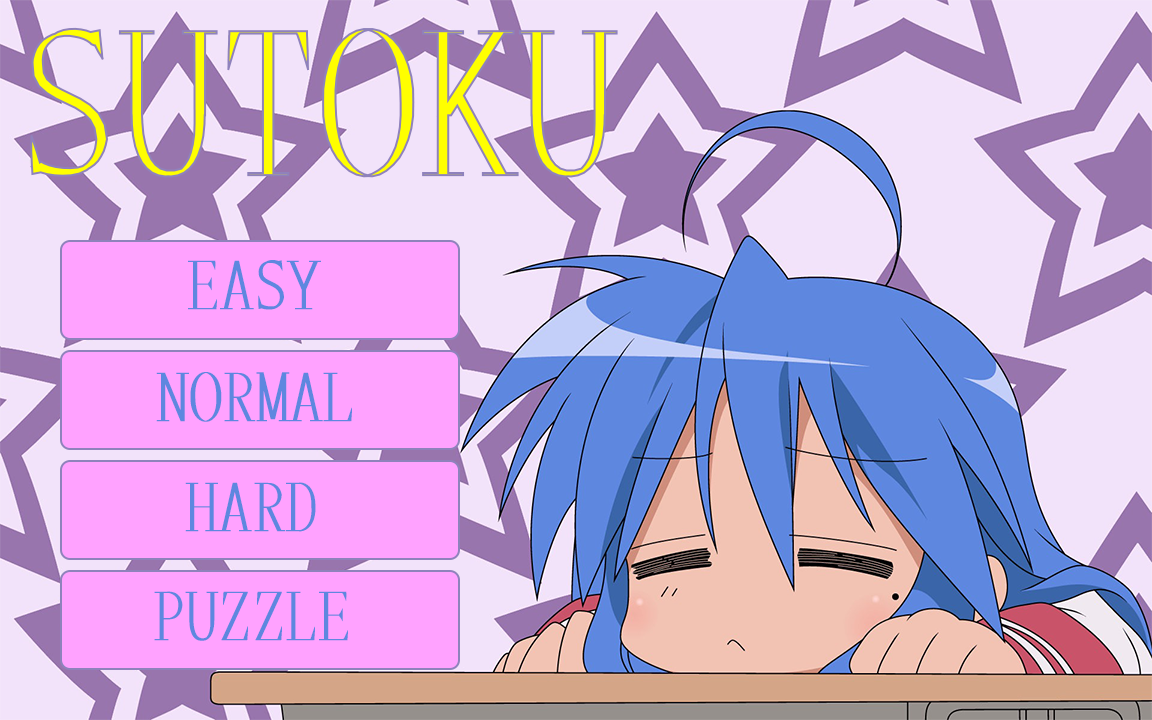
<style>
.page{position:relative;width:1152px;height:720px;background:#f2e3fa}
.page>*{position:absolute;margin:0}
.t1{font:66.7px "HanaMinA";color:#5e87df}
</style>
<div class="page">
<p class="t1" style="left:188px;top:260px;width:133px;height:50px">EASY</p>
<p class="t1" style="left:156px;top:372px;width:196px;height:50px">NORMAL</p>
<p class="t1" style="left:185px;top:482px;width:131px;height:50px">HARD</p>
<p class="t1" style="left:154px;top:591px;width:194px;height:50px">PUZZLE</p>
</div>
